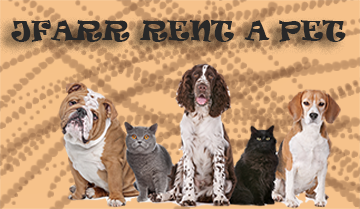
<style>
.page{position:relative;width:360px;height:209px}
.page>*{position:absolute;margin:0}
.t1{font:25px "Ravie";color:#282828}
</style>
<div class="page">
<p class="t1" style="left:11px;top:20px;width:335px;height:22px">JFARR RENT A PET</p>
</div>
